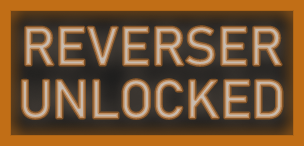
<style>
.page{position:relative;width:304px;height:146px}
.page>*{position:absolute;margin:0}
.t1{font:53.3px/53.3px "Bahnschrift"}
</style>
<div class="page">
<p class="t1" style="left:22px;top:26px;width:260px;height:93px;text-align:center">REVERSER<br>UNLOCKED</p>
</div>
